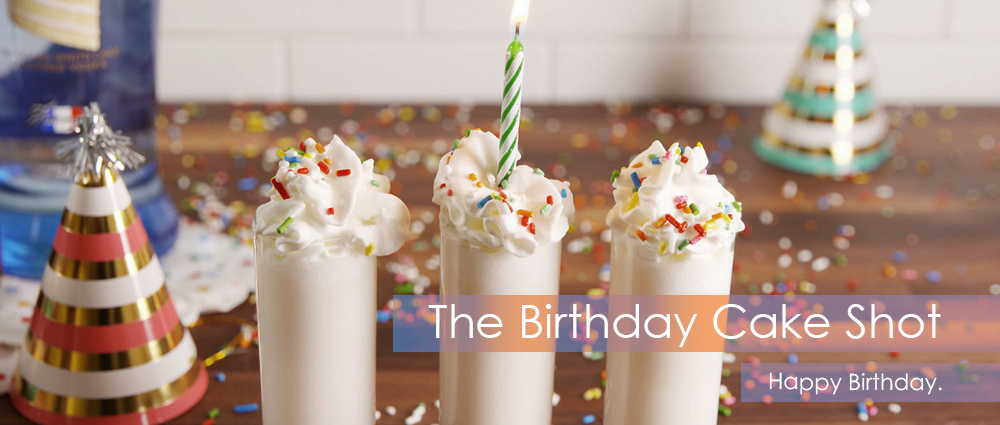
<style>
.page{position:relative;width:1000px;height:425px}
.page>*{position:absolute;margin:0}
.t1{font:45.8px "CenturyGothic";color:#ffffff}
.t2{font:22.6px "CenturyGothic";color:#fffefe}
</style>
<div class="page">
<p class="t1" style="left:428px;top:304px;width:513px;height:43px">The Birthday Cake Shot</p>
<p class="t2" style="left:769px;top:372px;width:173px;height:23px">Happy Birthday.</p>
</div>
